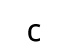
<style>
.page{position:relative;width:70px;height:55px;background:#ffffff}
.page>*{position:absolute;margin:0}
.t1{font:31.8px "DroidSans";color:#000000}
</style>
<div class="page">
<p class="t1" style="left:28px;top:24px;width:13px;height:18px">c</p>
</div>
